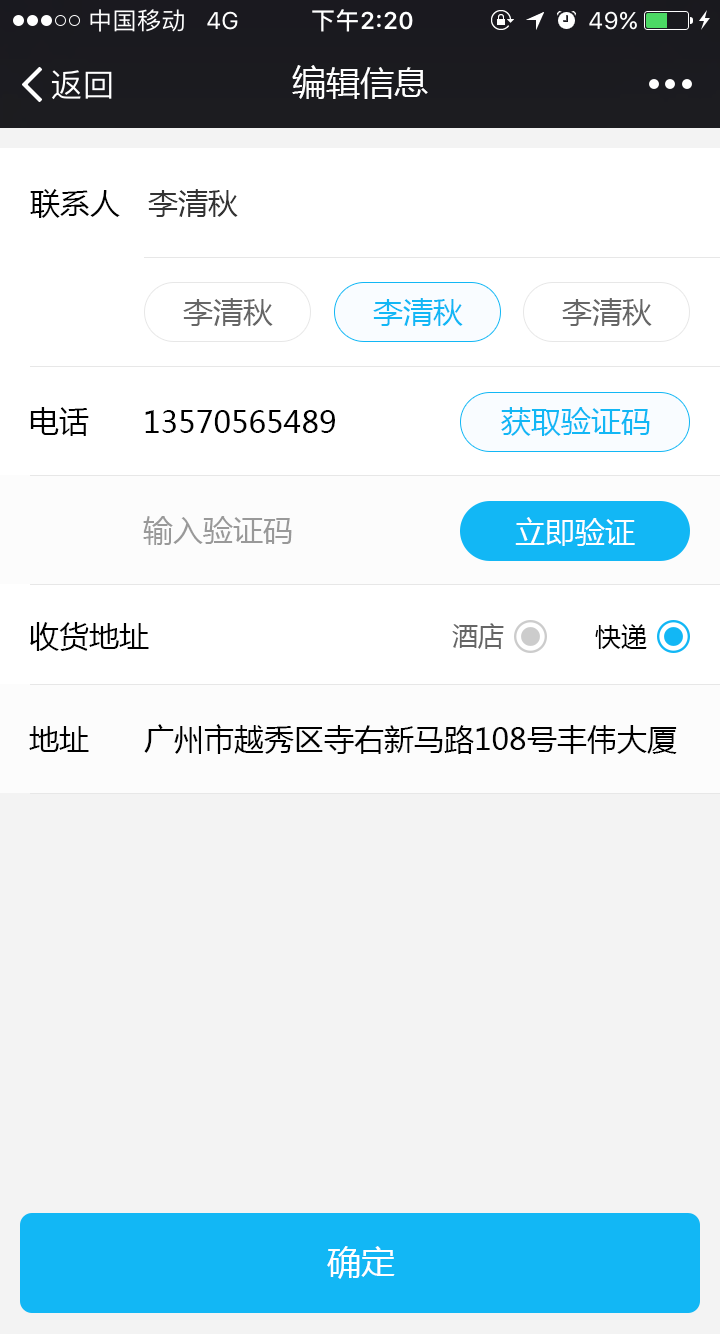
<style>
.page{position:relative;width:720px;height:1334px;background:#f3f3f3}
.page>*{position:absolute;margin:0}
.t1{font:34px "MicrosoftYaHei";color:#ffffff}
.t2{font:30px "MicrosoftYaHei";color:#000000}
.t3{font:30px "MicrosoftYaHei";color:#333333}
.t4{font:30px "MicrosoftYaHei";color:#666666}
.t5{font:30px "MicrosoftYaHei";color:#12b7f5}
.t6{font:30px "MicrosoftYaHei";color:#999999}
.t7{font:30px "MicrosoftYaHei";color:#ffffff}
.t8{font:26px "MicrosoftYaHei";color:#666666}
.t9{font:26px "MicrosoftYaHei";color:#000000}
</style>
<div class="page">
<p class="t1" style="left:292px;top:65px;width:136px;height:34px">编辑信息</p>
<p class="t2" style="left:30px;top:189px;width:90px;height:29px">联系人</p>
<p class="t3" style="left:148px;top:189px;width:90px;height:28px">李清秋</p>
<p class="t4" style="left:183px;top:298px;width:90px;height:28px">李清秋</p>
<p class="t5" style="left:373px;top:298px;width:90px;height:28px">李清秋</p>
<p class="t4" style="left:562px;top:298px;width:90px;height:28px">李清秋</p>
<p class="t2" style="left:30px;top:407px;width:59px;height:29px">电话</p>
<p class="t2" style="left:145px;top:410px;width:190px;height:23px">13570565489</p>
<p class="t5" style="left:501px;top:407px;width:149px;height:29px">获取验证码</p>
<p class="t6" style="left:143px;top:516px;width:149px;height:29px">输入验证码</p>
<p class="t7" style="left:515px;top:517px;width:120px;height:29px">立即验证</p>
<p class="t2" style="left:30px;top:622px;width:119px;height:29px">收货地址</p>
<p class="t8" style="left:452px;top:623px;width:52px;height:26px">酒店</p>
<p class="t9" style="left:595px;top:624px;width:52px;height:25px">快递</p>
<p class="t2" style="left:29px;top:726px;width:60px;height:26px">地址</p>
<p class="t2" style="left:144px;top:724px;width:533px;height:30px">广州市越秀区寺右新马路108号丰伟大厦</p>
<p class="t1" style="left:327px;top:1246px;width:68px;height:33px">确定</p>
</div>
